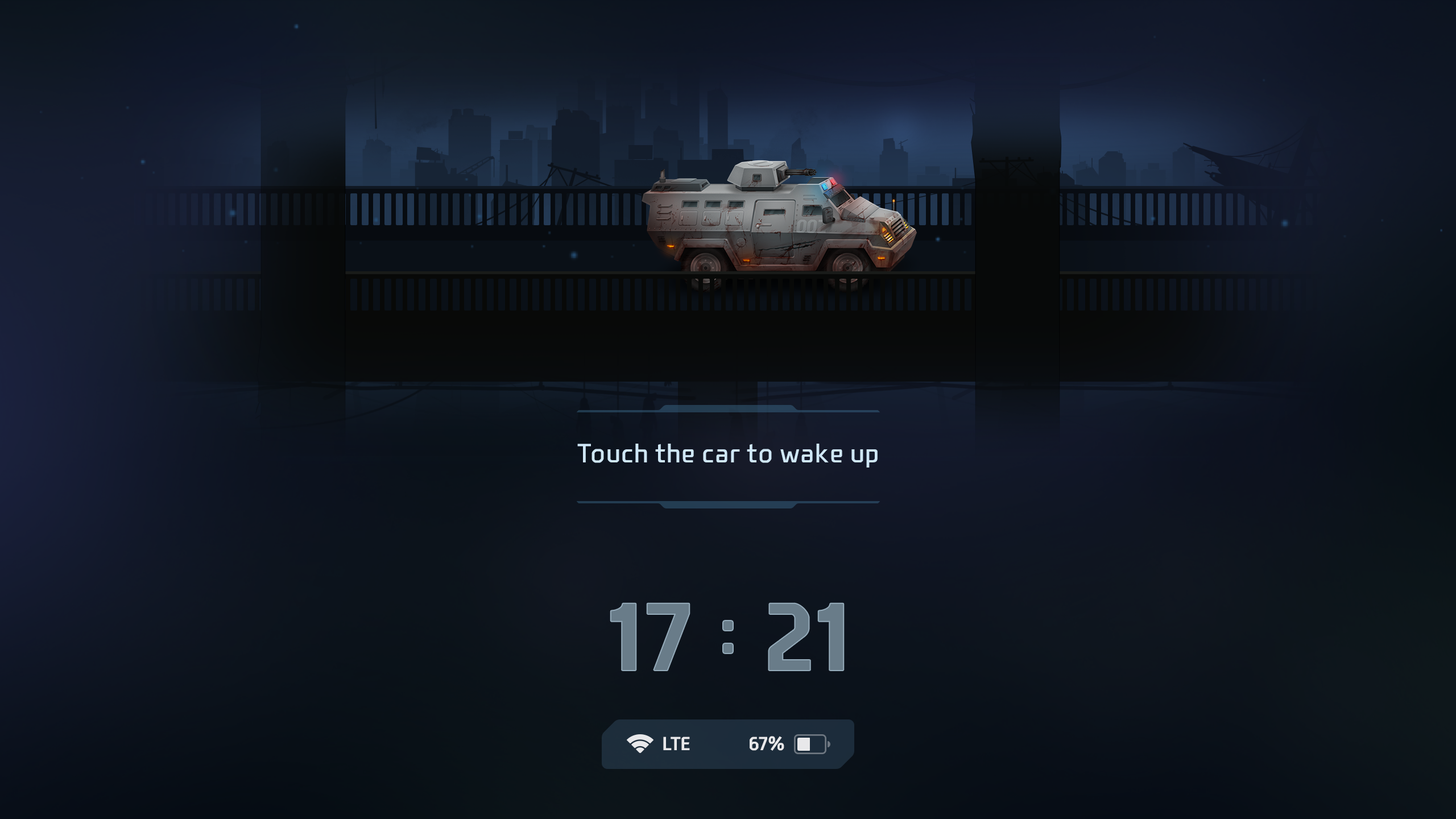
<style>
.page{position:relative;width:1456px;height:819px}
.page>*{position:absolute;margin:0}
.t1{font:25.8px "NEXONFootballGothicL";color:#cfe7f7}
.t2{font:91px "NEXONFootballGothicB";color:#697c89}
.t3{font:18.2px "NEXONFootballGothicB";color:#e8e8ea}
</style>
<div class="page">
<p class="t1" style="left:577px;top:444px;width:301px;height:24px">Touch the car to wake up</p>
<p class="t2" style="left:611px;top:603px;width:232px;height:67px">17   21</p>
<p class="t3" style="left:663px;top:737px;width:27px;height:13px">LTE</p>
<p class="t3" style="left:750px;top:736px;width:34px;height:15px">67%</p>
</div>
